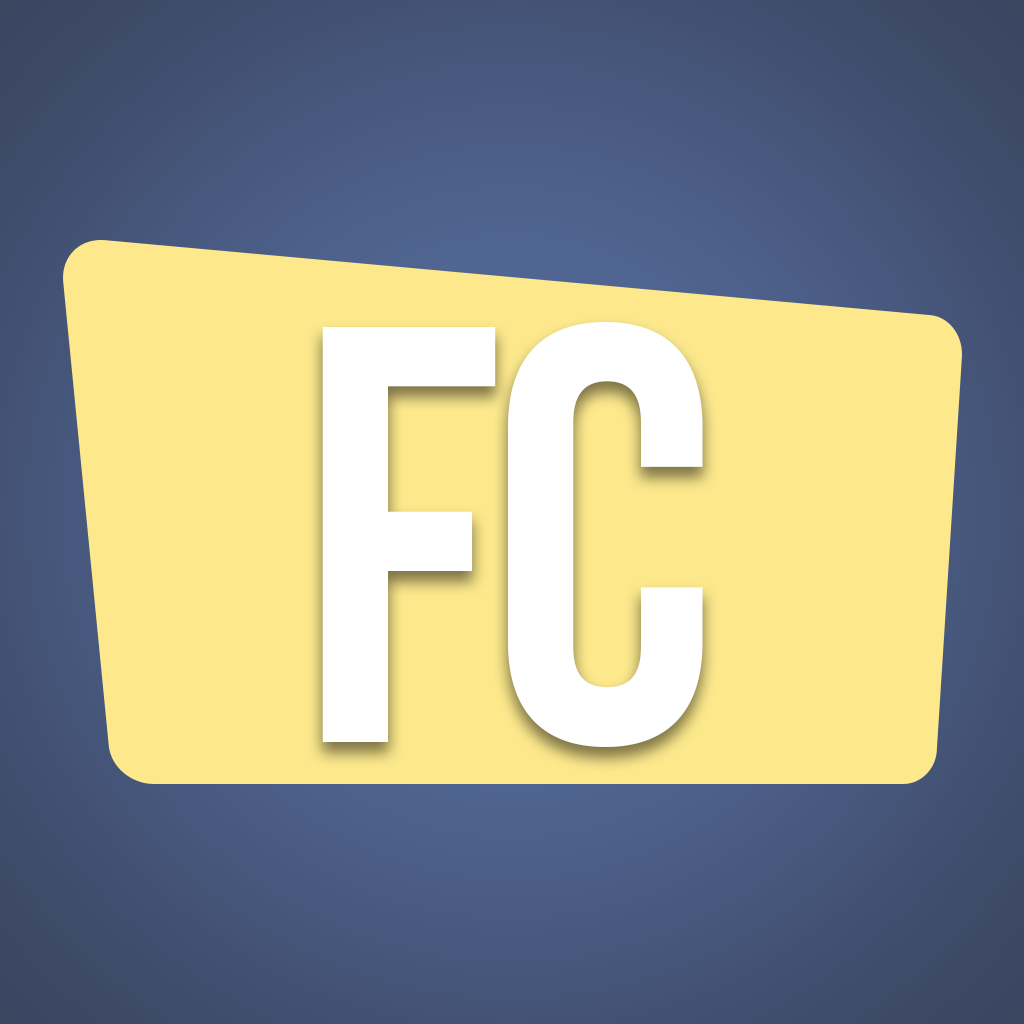
<style>
.page{position:relative;width:1024px;height:1024px;background:#fde98c}
.page>*{position:absolute;margin:0}
.t1{font:592.3px "BebasNeue";letter-spacing:-0.02em;color:#ffffff}
</style>
<div class="page">
<p class="t1" style="left:322px;top:322px;width:381px;height:425px">FC</p>
</div>
